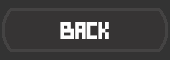
<style>
.page{position:relative;width:170px;height:60px;background:#363434}
.page>*{position:absolute;margin:0}
.t1{font:24px "PixelCyr-Normal";color:#ffffff}
</style>
<div class="page">
<p class="t1" style="left:60px;top:22px;width:49px;height:17px">BACK</p>
</div>
